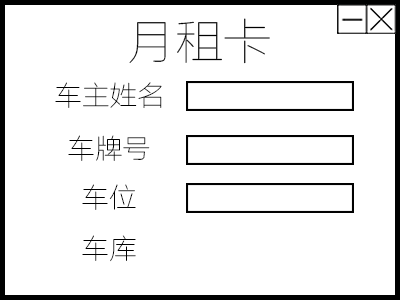
<style>
.page{position:relative;width:400px;height:300px;background:#ffffff}
.page>*{position:absolute;margin:0}
.t1{font:48.7px "FZLTCXHJW--GB1-0";color:#000000}
.t2{font:27.8px "FZLTCXHJW--GB1-0";color:#000000}
</style>
<div class="page">
<p class="t1" style="left:129px;top:18px;width:141px;height:46px">月租卡</p>
<p class="t2" style="left:55px;top:82px;width:107px;height:26px">车主姓名</p>
<p class="t2" style="left:68px;top:135px;width:82px;height:26px">车牌号</p>
<p class="t2" style="left:82px;top:184px;width:54px;height:26px">车位</p>
<p class="t2" style="left:82px;top:235px;width:54px;height:27px">车库</p>
</div>
